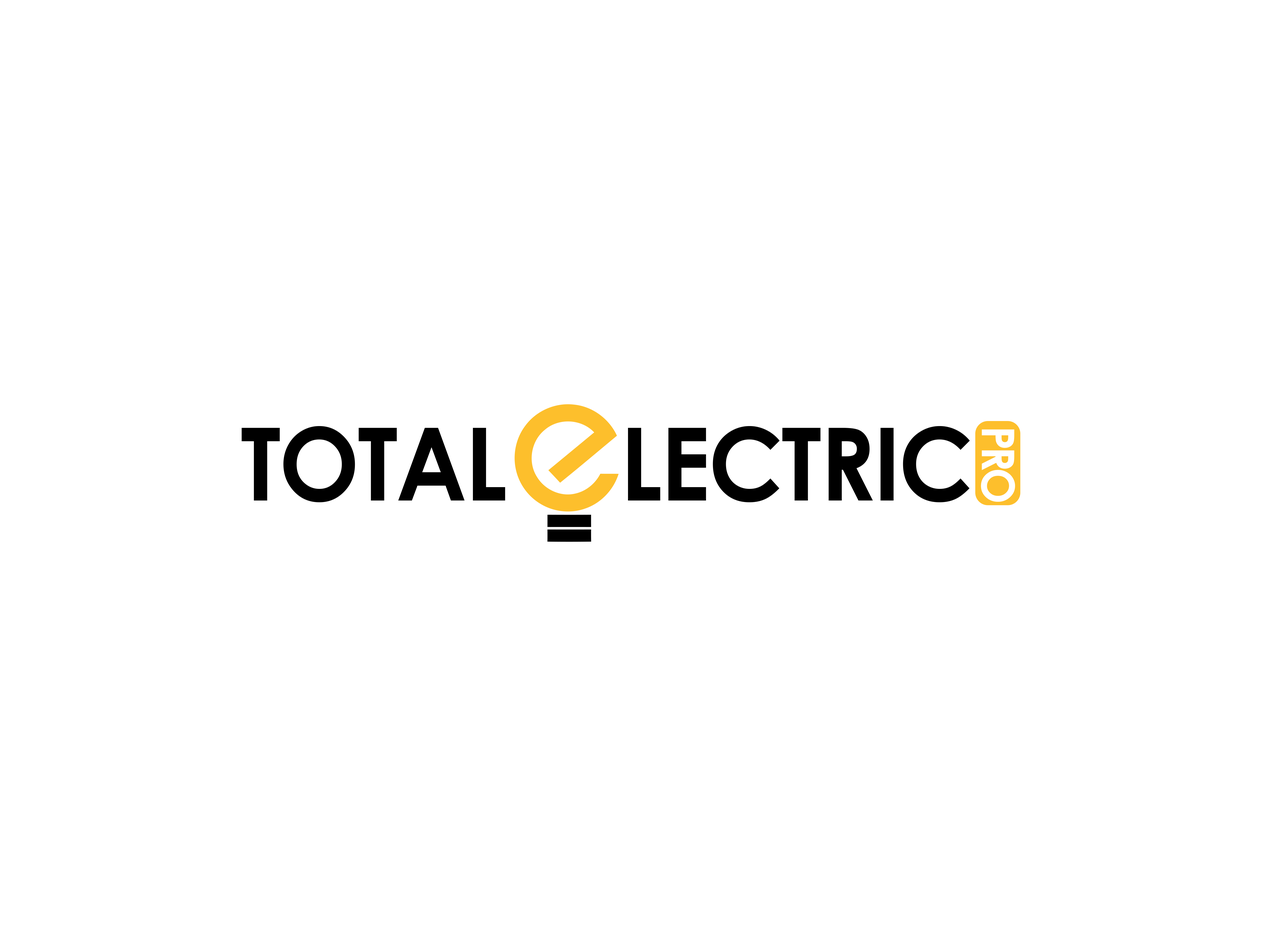
<style>
.page{position:relative;width:1261px;height:946px;background:#ffffff}
.page>*{position:absolute;margin:0}
.t1{font:101.2px "CenturyGothic-Bold";letter-spacing:-0.02em;color:#000000;scale:0.95 1}
.t2{font:45.1px "CenturyGothic-Bold";letter-spacing:-0.08em;color:#ffffff;scale:0.95 1}
</style>
<div class="page">
<p class="t1" style="left:242px;top:426px;width:728px;height:76px">TOTAL     LECTRIC</p>
<p class="t2" style="left:981px;top:429px;width:34px;height:73px">PRO</p>
</div>
